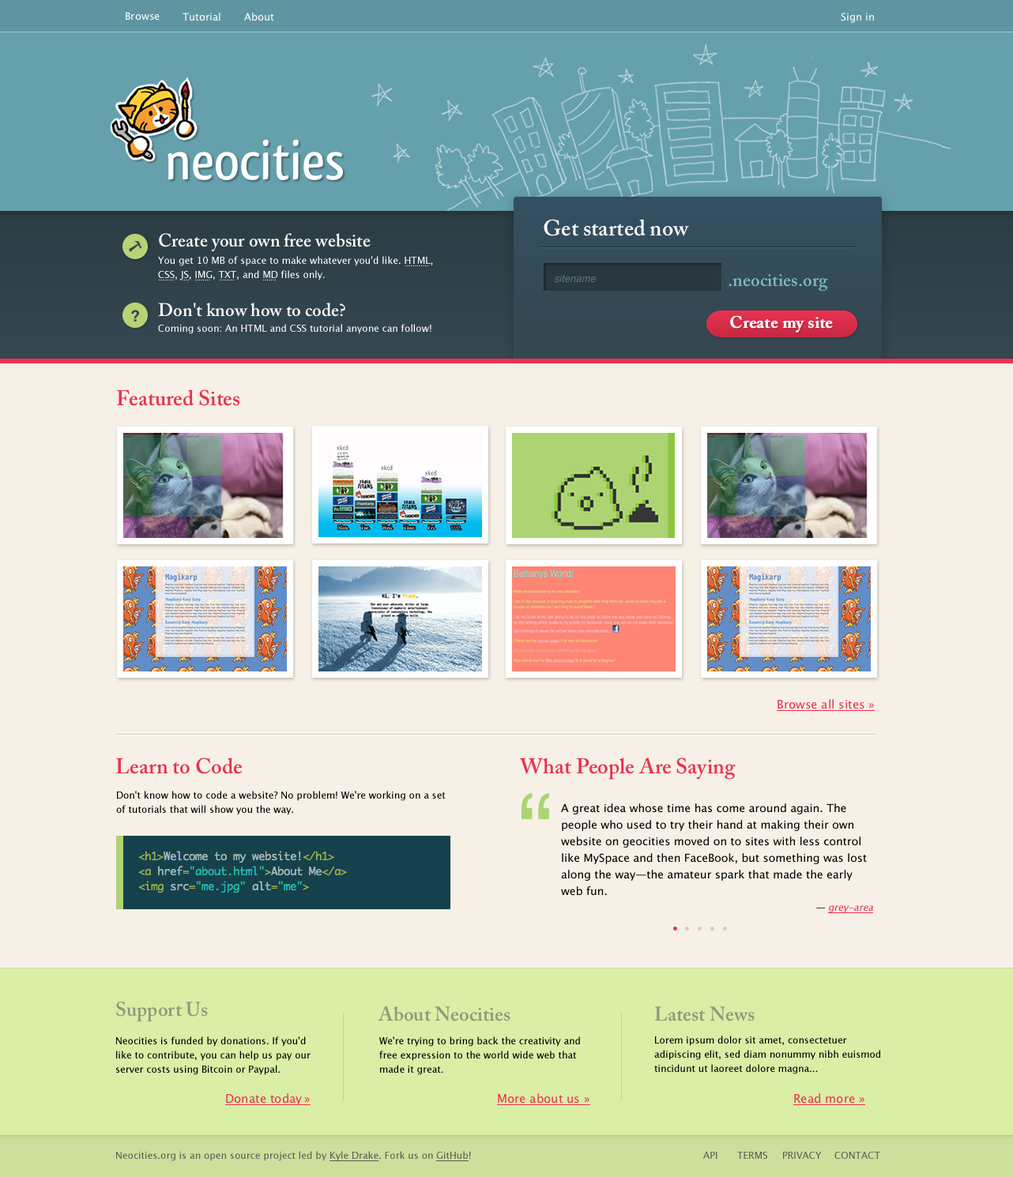
<style>
.page{position:relative;width:1013px;height:1177px;background:#f6f0e6}
.page>*{position:absolute;margin:0}
.t1{font:10.3px "MyriadPro-Regular";color:#ffffff}
.t2{font:56.9px "MyriadPro-Regular";color:#ffffff}
.t3{font:22.1px "MyriadPro-Regular";color:#ffffff}
.t4{font:18.2px "MyriadPro-Regular";color:#ffffff}
.t5{font:9.5px/14.2px "MyriadPro-Regular";color:#ffffff}
.t6{font:10.3px "Helvetica";color:#557380}
.t7{font:18.2px "MyriadPro-Regular";color:#81b8c6}
.t8{font:15.8px "Helvetica";color:#354751}
.t9{font:16.6px "MyriadPro-Regular";color:#ffffff}
.t10{font:9.5px "MyriadPro-Regular";color:#ffffff}
.t11{font:21.3px "MyriadPro-Regular";color:#e93250}
.t12{font:11.9px "MyriadPro-Regular";color:#e93250}
.t13{font:9.5px/14.2px "MyriadPro-Regular";color:#000000}
.t14{font:102.7px "Helvetica";color:#acd473}
.t15{font:11.1px/16.6px "MyriadPro-Regular";color:#000000}
.t16{font:9.5px "MyriadPro-Regular";color:#e93250}
.t17{font:19.8px "MyriadPro-Regular";color:#8b9a7a}
.t18{font:9.5px "MyriadPro-Regular";color:#5e5b56}
</style>
<div class="page">
<p class="t1" style="left:126px;top:12px;width:34px;height:9px">Browse</p>
<p class="t1" style="left:183px;top:13px;width:37px;height:8px">Tutorial</p>
<p class="t1" style="left:244px;top:13px;width:30px;height:8px">About</p>
<p class="t1" style="left:841px;top:13px;width:33px;height:10px">Sign in</p>
<p class="t2" style="left:168px;top:139px;width:175px;height:41px">neocities</p>
<p class="t3" style="left:544px;top:219px;width:145px;height:17px">Get started now</p>
<p class="t4" style="left:159px;top:233px;width:212px;height:19px">Create your own free website</p>
<p class="t5" style="left:158px;top:256px;width:275px;height:24px">You get 10 MB of space to make whatever you’d like. HTML, <br>CSS, JS, IMG, TXT, and MD files only.</p>
<p class="t6" style="left:554px;top:274px;width:42px;height:9px">sitename</p>
<p class="t7" style="left:728px;top:274px;width:100px;height:18px">.neocities.org</p>
<p class="t4" style="left:158px;top:303px;width:187px;height:14px">Don’t know how to code?</p>
<p class="t8" style="left:131px;top:310px;width:9px;height:12px">?</p>
<p class="t9" style="left:730px;top:315px;width:103px;height:18px">Create my site</p>
<p class="t10" style="left:158px;top:324px;width:273px;height:10px">Coming soon: An HTML and CSS tutorial anyone can follow!</p>
<p class="t11" style="left:116px;top:390px;width:124px;height:16px">Featured Sites</p>
<p class="t12" style="left:777px;top:699px;width:98px;height:12px">Browse all sites »</p>
<p class="t11" style="left:116px;top:758px;width:127px;height:16px">Learn to Code</p>
<p class="t11" style="left:519px;top:758px;width:217px;height:22px">What People Are Saying</p>
<p class="t13" style="left:116px;top:791px;width:330px;height:24px">Don’t know how to code a website? No problem! We’re working on a set <br>of tutorials that will show you the way.</p>
<p class="t14" style="left:521px;top:792px;width:28px;height:27px">“</p>
<p class="t15" style="left:561px;top:804px;width:306px;height:92px">A great idea whose time has come around again. The <br>people who used to try their hand at making their own <br>website on geocities moved on to sites with less control <br>like MySpace and then FaceBook, but something was lost <br>along the way—the amateur spark that made the early <br>web fun.</p>
<p class="t16" style="left:816px;top:905px;width:57px;height:8px">— grey-area</p>
<p class="t17" style="left:116px;top:1001px;width:92px;height:21px">Support Us</p>
<p class="t17" style="left:378px;top:1006px;width:132px;height:16px">About Neocities</p>
<p class="t17" style="left:654px;top:1007px;width:101px;height:15px">Latest News</p>
<p class="t13" style="left:116px;top:1037px;width:195px;height:38px">Neocities is funded by donations. If you’d <br>like to contribute, you can help us pay our <br>server costs using Bitcoin or Paypal.</p>
<p class="t13" style="left:379px;top:1037px;width:201px;height:38px">We’re trying to bring back the creativity and <br>free expression to the world wide web that <br>made it great.</p>
<p class="t13" style="left:654px;top:1036px;width:226px;height:39px">Lorem ipsum dolor sit amet, consectetuer <br>adipiscing elit, sed diam nonummy nibh euismod <br>tincidunt ut laoreet dolore magna...</p>
<p class="t12" style="left:225px;top:1093px;width:86px;height:12px">Donate today »</p>
<p class="t12" style="left:497px;top:1093px;width:93px;height:12px">More about us »</p>
<p class="t12" style="left:793px;top:1093px;width:72px;height:12px">Read more »</p>
<p class="t18" style="left:116px;top:1151px;width:355px;height:10px">Neocities.org is an open source project led by Kyle Drake. Fork us on GitHub!</p>
<p class="t18" style="left:703px;top:1152px;width:14px;height:7px">API</p>
<p class="t18" style="left:737px;top:1152px;width:30px;height:7px">TERMS</p>
<p class="t18" style="left:783px;top:1152px;width:39px;height:7px">PRIVACY</p>
<p class="t18" style="left:834px;top:1152px;width:46px;height:7px">CONTACT</p>
</div>
